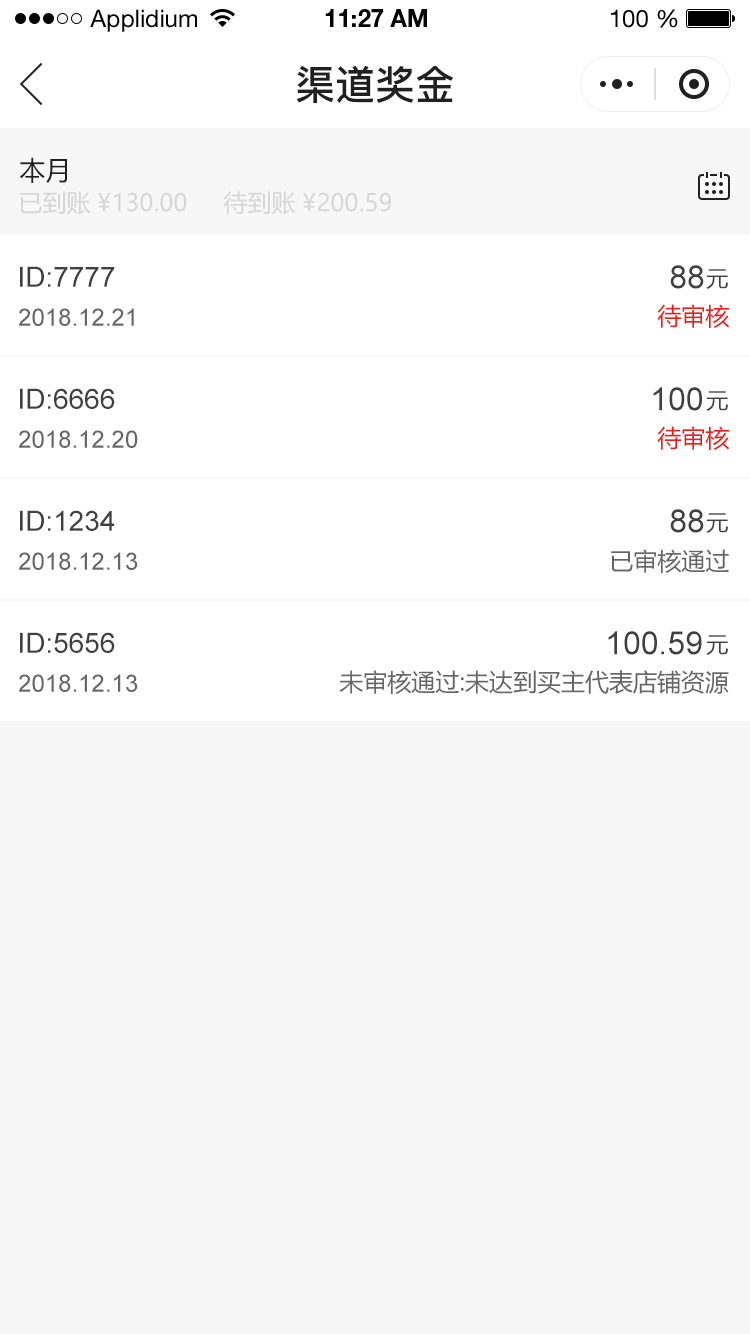
<style>
.page{position:relative;width:750px;height:1334px;background:#f7f7f7}
.page>*{position:absolute;margin:0}
.t1{font:24px "HelveticaNeueLTStd-Roman";color:#000000}
.t2{font:24px "HelveticaNeueLTStd-Bd";color:#000000}
.t3{font:40px "PingFang-SC-Bold";color:#202020;text-transform:uppercase}
.t4{font:26px "MicrosoftYaHei";color:#202020;text-transform:uppercase}
.t5{font:24px "MicrosoftYaHei";color:#d6d6d6;text-transform:uppercase}
.t6{font:28px "ArialMT";color:#404040;text-transform:uppercase}
.t7{font:32px "ArialMT";color:#404040;text-transform:uppercase}
.t8{font:22px "MicrosoftYaHei";color:#404040;text-transform:uppercase}
.t9{font:24px "MicrosoftYaHei";color:#e61f18;text-transform:uppercase}
.t10{font:24px "ArialMT";color:#666666;text-transform:uppercase}
.t11{font:24px "MicrosoftYaHei";color:#666666;text-transform:uppercase}
</style>
<div class="page">
<p class="t1" style="left:90px;top:9px;width:107px;height:23px">Applidium</p>
<p class="t2" style="left:325px;top:9px;width:102px;height:18px">11:27 AM</p>
<p class="t1" style="left:611px;top:9px;width:67px;height:19px">100 %</p>
<p class="t3" style="left:296px;top:65px;width:158px;height:38px">渠道奖金</p>
<p class="t4" style="left:20px;top:157px;width:47px;height:26px">本月</p>
<p class="t5" style="left:20px;top:191px;width:167px;height:24px">已到账 ¥130.00</p>
<p class="t5" style="left:223px;top:191px;width:168px;height:24px">待到账 ¥200.59</p>
<p class="t6" style="left:20px;top:266px;width:95px;height:21px">ID:7777</p>
<p class="t7" style="left:670px;top:265px;width:34px;height:24px">88</p>
<p class="t8" style="left:706px;top:269px;width:22px;height:20px">元</p>
<p class="t9" style="left:657px;top:304px;width:73px;height:24px">待审核</p>
<p class="t10" style="left:19px;top:308px;width:115px;height:18px">2018.12.21</p>
<p class="t6" style="left:20px;top:388px;width:95px;height:21px">ID:6666</p>
<p class="t7" style="left:653px;top:387px;width:49px;height:24px">100</p>
<p class="t8" style="left:706px;top:391px;width:22px;height:20px">元</p>
<p class="t10" style="left:19px;top:430px;width:119px;height:18px">2018.12.20</p>
<p class="t9" style="left:657px;top:426px;width:73px;height:24px">待审核</p>
<p class="t6" style="left:20px;top:510px;width:95px;height:21px">ID:1234</p>
<p class="t7" style="left:670px;top:509px;width:34px;height:24px">88</p>
<p class="t8" style="left:706px;top:513px;width:22px;height:20px">元</p>
<p class="t10" style="left:19px;top:552px;width:119px;height:18px">2018.12.13</p>
<p class="t11" style="left:611px;top:549px;width:118px;height:24px">已审核通过</p>
<p class="t6" style="left:20px;top:632px;width:95px;height:21px">ID:5656</p>
<p class="t7" style="left:608px;top:631px;width:94px;height:24px">100.59</p>
<p class="t8" style="left:706px;top:635px;width:22px;height:20px">元</p>
<p class="t10" style="left:19px;top:674px;width:119px;height:18px">2018.12.13</p>
<p class="t11" style="left:339px;top:670px;width:390px;height:24px">未审核通过:未达到买主代表店铺资源</p>
</div>
